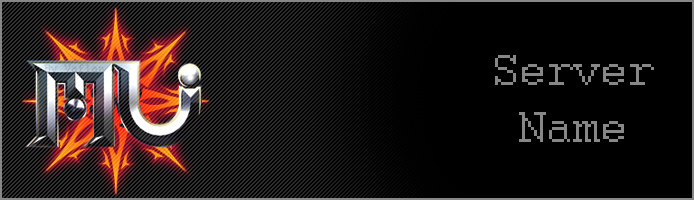
<style>
.page{position:relative;width:694px;height:200px;background:#000000}
.page>*{position:absolute;margin:0}
.t1{font:48px "Courier";color:#878787}
</style>
<div class="page">
<p class="t1" style="left:495px;top:55px;width:159px;height:87px;text-align:center">Server<br>Name</p>
</div>
